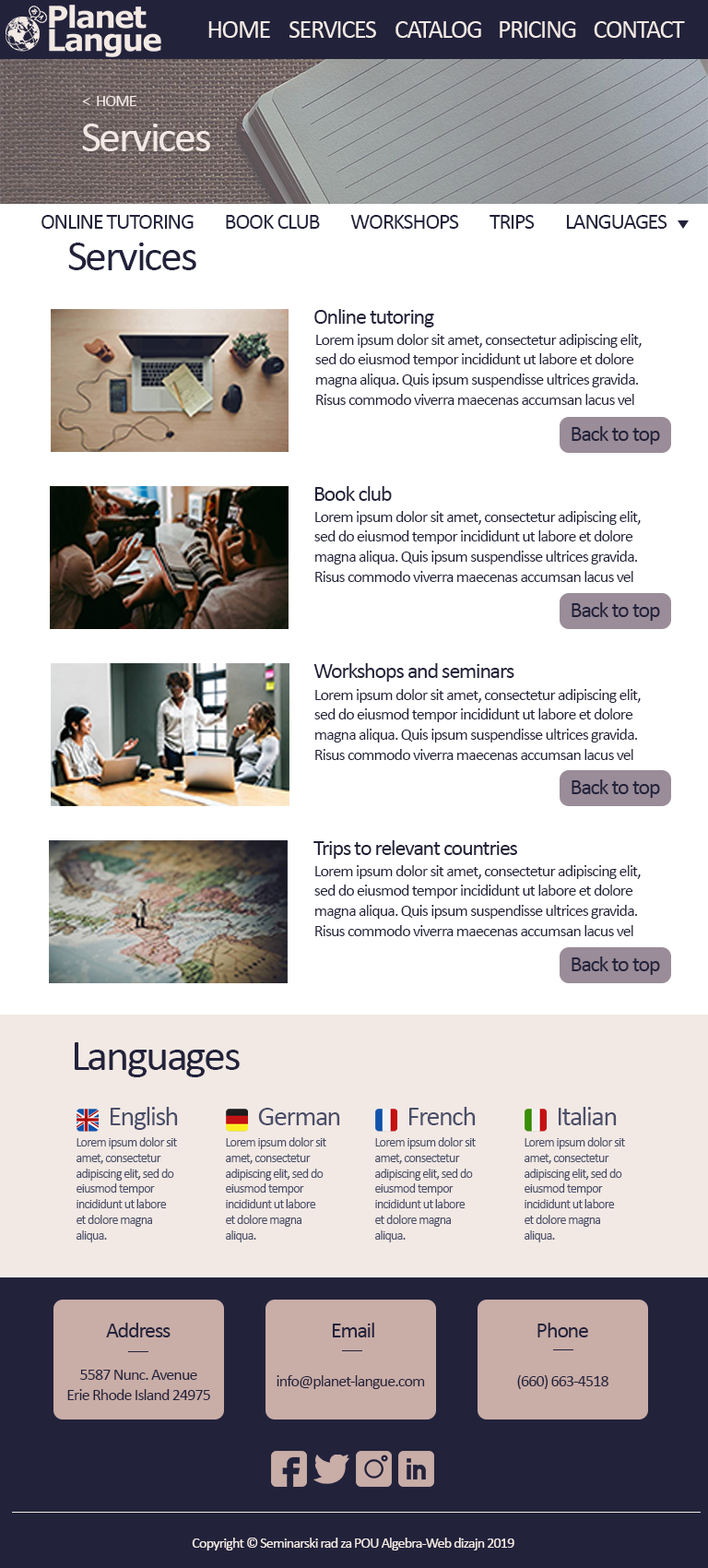
<style>
.page{position:relative;width:708px;height:1568px;background:#ffffff}
.page>*{position:absolute;margin:0}
.t1{font:25.8px "Calibri";letter-spacing:-0.05em;color:#f2e9e4}
.t2{font:16.6px "Calibri";letter-spacing:-0.05em;color:#f2e9e4}
.t3{font:44.3px "Calibri";letter-spacing:-0.05em;color:#f2e9e4}
.t4{font:22.1px "Calibri";letter-spacing:-0.05em;color:#22223b}
.t5{font:44.3px "Calibri";letter-spacing:-0.05em;color:#22223b}
.t6{font:16.6px "Calibri";letter-spacing:-0.05em;color:#22223b}
.t7{font:27.7px "Calibri";letter-spacing:-0.05em;color:#4a4e69}
.t8{font:12.9px "Calibri";letter-spacing:-0.05em;color:#4a4e69}
.t9{font:14.8px "Calibri";letter-spacing:-0.05em;color:#f2e9e4}
</style>
<div class="page">
<p class="t1" style="left:208px;top:21px;width:62px;height:17px">HOME</p>
<p class="t1" style="left:290px;top:21px;width:86px;height:17px">SERVICES</p>
<p class="t1" style="left:396px;top:21px;width:85px;height:17px">CATALOG</p>
<p class="t1" style="left:500px;top:21px;width:76px;height:17px">PRICING</p>
<p class="t1" style="left:594px;top:21px;width:91px;height:17px">CONTACT</p>
<p class="t2" style="left:83px;top:96px;width:54px;height:10px">&lt;  HOME</p>
<p class="t3" style="left:82px;top:124px;width:128px;height:27px">Services</p>
<p class="t4" style="left:42px;top:215px;width:626px;height:14px">ONLINE TUTORING        BOOK CLUB        WORKSHOPS        TRIPS        LANGUAGES</p>
<p class="t5" style="left:68px;top:243px;width:128px;height:27px">Services</p>
<p class="t4" style="left:315px;top:309px;width:119px;height:18px">Online tutoring</p>
<p class="t6" style="left:315px;top:334px;width:327px;height:71px">Lorem ipsum dolor sit amet, consectetur adipiscing elit, sed do eiusmod tempor incididunt ut labore et dolore magna aliqua. Quis ipsum suspendisse ultrices gravida. Risus commodo viverra maecenas accumsan lacus vel facilisis.</p>
<p class="t4" style="left:572px;top:426px;width:88px;height:19px">Back to top</p>
<p class="t4" style="left:315px;top:486px;width:77px;height:15px">Book club</p>
<p class="t6" style="left:315px;top:511px;width:326px;height:71px">Lorem ipsum dolor sit amet, consectetur adipiscing elit, sed do eiusmod tempor incididunt ut labore et dolore magna aliqua. Quis ipsum suspendisse ultrices gravida. Risus commodo viverra maecenas accumsan lacus vel facilisis.</p>
<p class="t4" style="left:572px;top:602px;width:88px;height:19px">Back to top</p>
<p class="t4" style="left:314px;top:663px;width:201px;height:19px">Workshops and seminars</p>
<p class="t6" style="left:315px;top:689px;width:326px;height:71px">Lorem ipsum dolor sit amet, consectetur adipiscing elit, sed do eiusmod tempor incididunt ut labore et dolore magna aliqua. Quis ipsum suspendisse ultrices gravida. Risus commodo viverra maecenas accumsan lacus vel facilisis.</p>
<p class="t4" style="left:572px;top:779px;width:88px;height:19px">Back to top</p>
<p class="t4" style="left:314px;top:840px;width:203px;height:19px">Trips to relevant countries</p>
<p class="t6" style="left:315px;top:865px;width:326px;height:71px">Lorem ipsum dolor sit amet, consectetur adipiscing elit, sed do eiusmod tempor incididunt ut labore et dolore magna aliqua. Quis ipsum suspendisse ultrices gravida. Risus commodo viverra maecenas accumsan lacus vel facilisis.</p>
<p class="t4" style="left:572px;top:956px;width:88px;height:19px">Back to top</p>
<p class="t5" style="left:75px;top:1042px;width:165px;height:35px">Languages</p>
<p class="t7" style="left:111px;top:1107px;width:67px;height:23px">English</p>
<p class="t7" style="left:258px;top:1108px;width:82px;height:17px">German</p>
<p class="t7" style="left:410px;top:1107px;width:66px;height:18px">French</p>
<p class="t7" style="left:559px;top:1107px;width:58px;height:18px">Italian</p>
<p class="t8" style="left:77px;top:1137px;width:100px;height:105px">Lorem ipsum dolor sit amet, consectetur adipiscing elit, sed do eiusmod tempor incididunt ut labore et dolore magna aliqua.</p>
<p class="t8" style="left:226px;top:1137px;width:101px;height:105px">Lorem ipsum dolor sit amet, consectetur adipiscing elit, sed do eiusmod tempor incididunt ut labore et dolore magna aliqua.</p>
<p class="t8" style="left:375px;top:1137px;width:101px;height:105px">Lorem ipsum dolor sit amet, consectetur adipiscing elit, sed do eiusmod tempor incididunt ut labore et dolore magna aliqua.</p>
<p class="t8" style="left:525px;top:1137px;width:100px;height:105px">Lorem ipsum dolor sit amet, consectetur adipiscing elit, sed do eiusmod tempor incididunt ut labore et dolore magna aliqua.</p>
<p class="t4" style="left:106px;top:1323px;width:65px;height:14px">Address</p>
<p class="t4" style="left:332px;top:1323px;width:42px;height:14px">Email</p>
<p class="t4" style="left:538px;top:1323px;width:50px;height:14px">Phone</p>
<p class="t6" style="left:67px;top:1370px;width:143px;height:30px;text-align:center">5587 Nunc. Avenue<br>Erie Rhode Island 24975</p>
<p class="t6" style="left:277px;top:1375px;width:148px;height:14px">info@planet-langue.com</p>
<p class="t6" style="left:517px;top:1375px;width:92px;height:14px">(660) 663-4518</p>
<p class="t9" style="left:192px;top:1538px;width:323px;height:12px">Copyright © Seminarski rad za POU Algebra-Web dizajn 2019</p>
</div>
